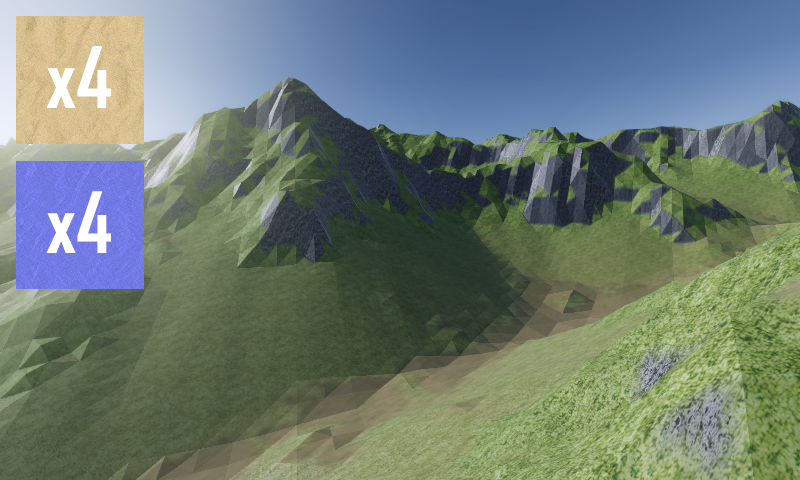
<style>
.page{position:relative;width:800px;height:480px}
.page>*{position:absolute;margin:0}
.t1{font:80.4px "AgencyFB-Bold";color:#ffffff}
</style>
<div class="page">
<p class="t1" style="left:46px;top:46px;width:65px;height:62px">x4</p>
<p class="t1" style="left:46px;top:191px;width:65px;height:62px">x4</p>
</div>
